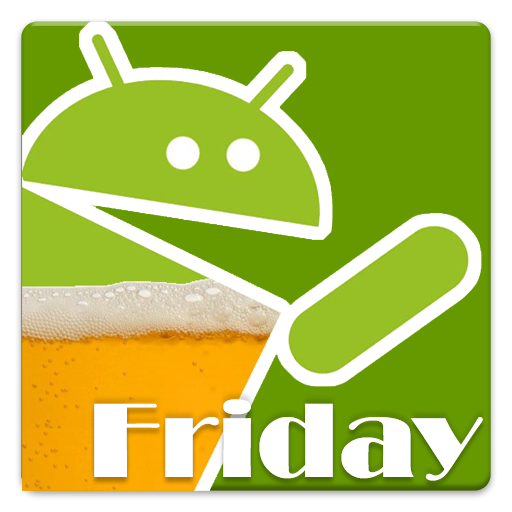
<style>
.page{position:relative;width:512px;height:512px;background:#669900}
.page>*{position:absolute;margin:0}
.t1{font:110px "Broadway";color:#ffffff}
</style>
<div class="page">
<p class="t1" style="left:94px;top:399px;width:389px;height:82px">Friday</p>
<p class="t1" style="left:94px;top:399px;width:389px;height:82px">Friday</p>
</div>
